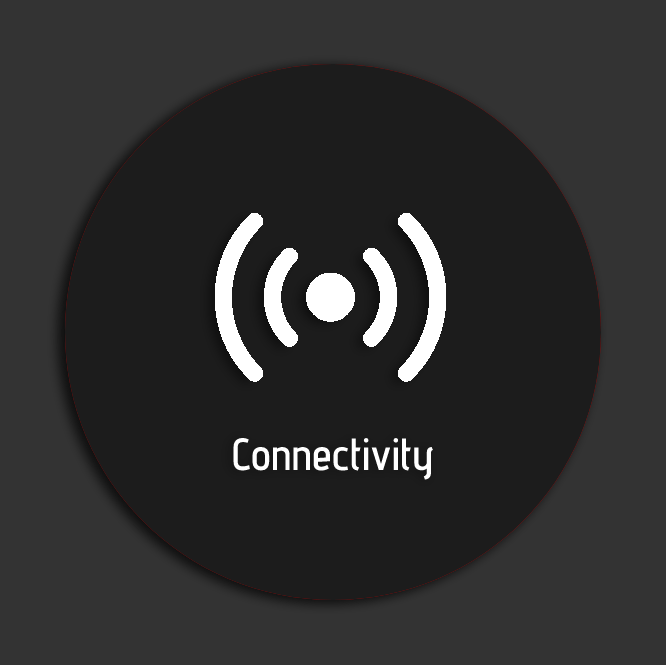
<style>
.page{position:relative;width:666px;height:665px;background:#333333}
.page>*{position:absolute;margin:0}
.t1{font:45px "AdventPro-SemiBold";color:#ffffff}
</style>
<div class="page">
<p class="t1" style="left:233px;top:438px;width:200px;height:42px">Connectivity</p>
</div>
